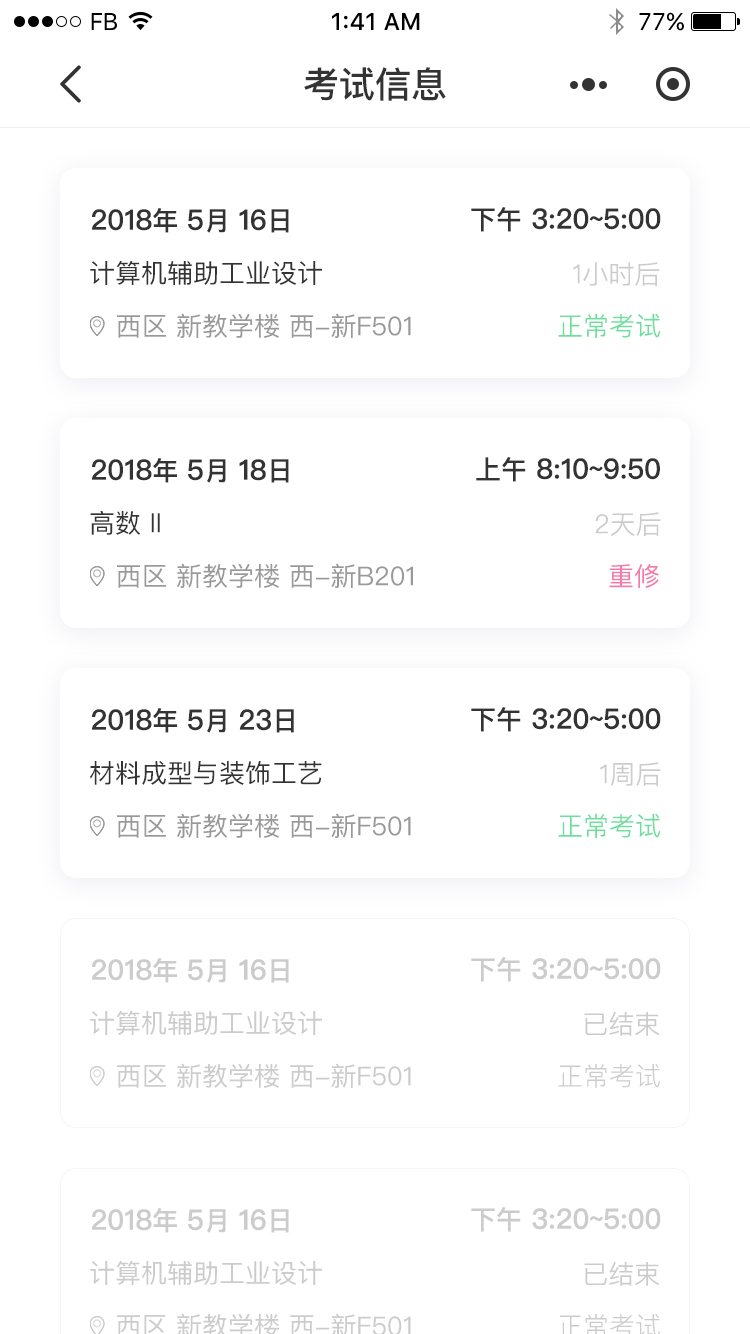
<style>
.page{position:relative;width:750px;height:1334px;background:#ffffff}
.page>*{position:absolute;margin:0}
.t1{font:24px "SFUIText-Regular";letter-spacing:-0.025em;color:#000000}
.t2{font:24px "SFUIText-Medium";color:#000000}
.t3{font:24px "SFUIText-Regular";color:#000000}
.t4{font:36px "PingFangSC-Medium";color:#333333}
.t5{font:28px "PingFangSC-Medium";color:#333333}
.t6{font:26px "PingFangSC-Medium";color:#333333}
.t7{font:26px "PingFangSC-Regular";color:#333333}
.t8{font:26px "PingFangSC-Light";color:#cccccc}
.t9{font:26px "PingFangSC-Regular";color:#999999}
.t10{font:26px "PingFangSC-Light";color:#6dde9e}
.t11{font:26px "PingFangSC-Regular";color:#f47aa9}
.t12{font:28px "PingFangSC-Medium";color:#cccccc}
.t13{font:26px "PingFangSC-Medium";color:#cccccc}
.t14{font:26px "PingFangSC-Regular";color:#cccccc}
</style>
<div class="page">
<p class="t1" style="left:91px;top:13px;width:26px;height:17px">FB</p>
<p class="t2" style="left:332px;top:13px;width:88px;height:17px">1:41 AM</p>
<p class="t3" style="left:639px;top:12px;width:45px;height:19px">77%</p>
<p class="t4" style="left:304px;top:67px;width:142px;height:34px">考试信息</p>
<p class="t5" style="left:92px;top:208px;width:197px;height:25px">2018<span class="t6">年 </span>5<span class="t6">月 </span>16<span class="t6">日</span></p>
<p class="t5" style="left:471px;top:207px;width:190px;height:25px"><span class="t6">下午</span> 3:20~5:00</p>
<p class="t7" style="left:90px;top:260px;width:232px;height:25px">计算机辅助工业设计</p>
<p class="t8" style="left:573px;top:262px;width:87px;height:24px">1小时后</p>
<p class="t9" style="left:117px;top:313px;width:294px;height:25px">西区 新教学楼 西-新F501</p>
<p class="t10" style="left:558px;top:313px;width:103px;height:25px">正常考试</p>
<p class="t5" style="left:92px;top:458px;width:197px;height:25px">2018<span class="t6">年 </span>5<span class="t6">月 </span>18<span class="t6">日</span></p>
<p class="t5" style="left:476px;top:457px;width:184px;height:25px"><span class="t6">上午</span> 8:10~9:50</p>
<p class="t7" style="left:90px;top:510px;width:70px;height:25px">高数 ll</p>
<p class="t8" style="left:595px;top:512px;width:66px;height:24px">2天后</p>
<p class="t9" style="left:117px;top:563px;width:296px;height:25px">西区 新教学楼 西-新B201</p>
<p class="t11" style="left:609px;top:564px;width:50px;height:24px">重修</p>
<p class="t5" style="left:92px;top:708px;width:202px;height:25px">2018<span class="t6">年 </span>5<span class="t6">月 </span>23<span class="t6">日</span></p>
<p class="t5" style="left:471px;top:707px;width:190px;height:25px"><span class="t6">下午</span> 3:20~5:00</p>
<p class="t7" style="left:90px;top:761px;width:232px;height:24px">材料成型与装饰工艺</p>
<p class="t8" style="left:600px;top:762px;width:61px;height:24px">1周后</p>
<p class="t9" style="left:117px;top:813px;width:294px;height:25px">西区 新教学楼 西-新F501</p>
<p class="t10" style="left:558px;top:813px;width:103px;height:25px">正常考试</p>
<p class="t12" style="left:92px;top:958px;width:197px;height:25px">2018<span class="t13">年 </span>5<span class="t13">月 </span>16<span class="t13">日</span></p>
<p class="t12" style="left:471px;top:957px;width:190px;height:25px"><span class="t13">下午</span> 3:20~5:00</p>
<p class="t14" style="left:90px;top:1010px;width:232px;height:25px">计算机辅助工业设计</p>
<p class="t8" style="left:584px;top:1012px;width:76px;height:24px">已结束</p>
<p class="t14" style="left:117px;top:1063px;width:294px;height:25px">西区 新教学楼 西-新F501</p>
<p class="t8" style="left:558px;top:1064px;width:102px;height:24px">正常考试</p>
<p class="t12" style="left:92px;top:1208px;width:197px;height:25px">2018<span class="t13">年 </span>5<span class="t13">月 </span>16<span class="t13">日</span></p>
<p class="t12" style="left:471px;top:1207px;width:190px;height:25px"><span class="t13">下午</span> 3:20~5:00</p>
<p class="t14" style="left:90px;top:1260px;width:232px;height:25px">计算机辅助工业设计</p>
<p class="t8" style="left:584px;top:1262px;width:76px;height:24px">已结束</p>
</div>
